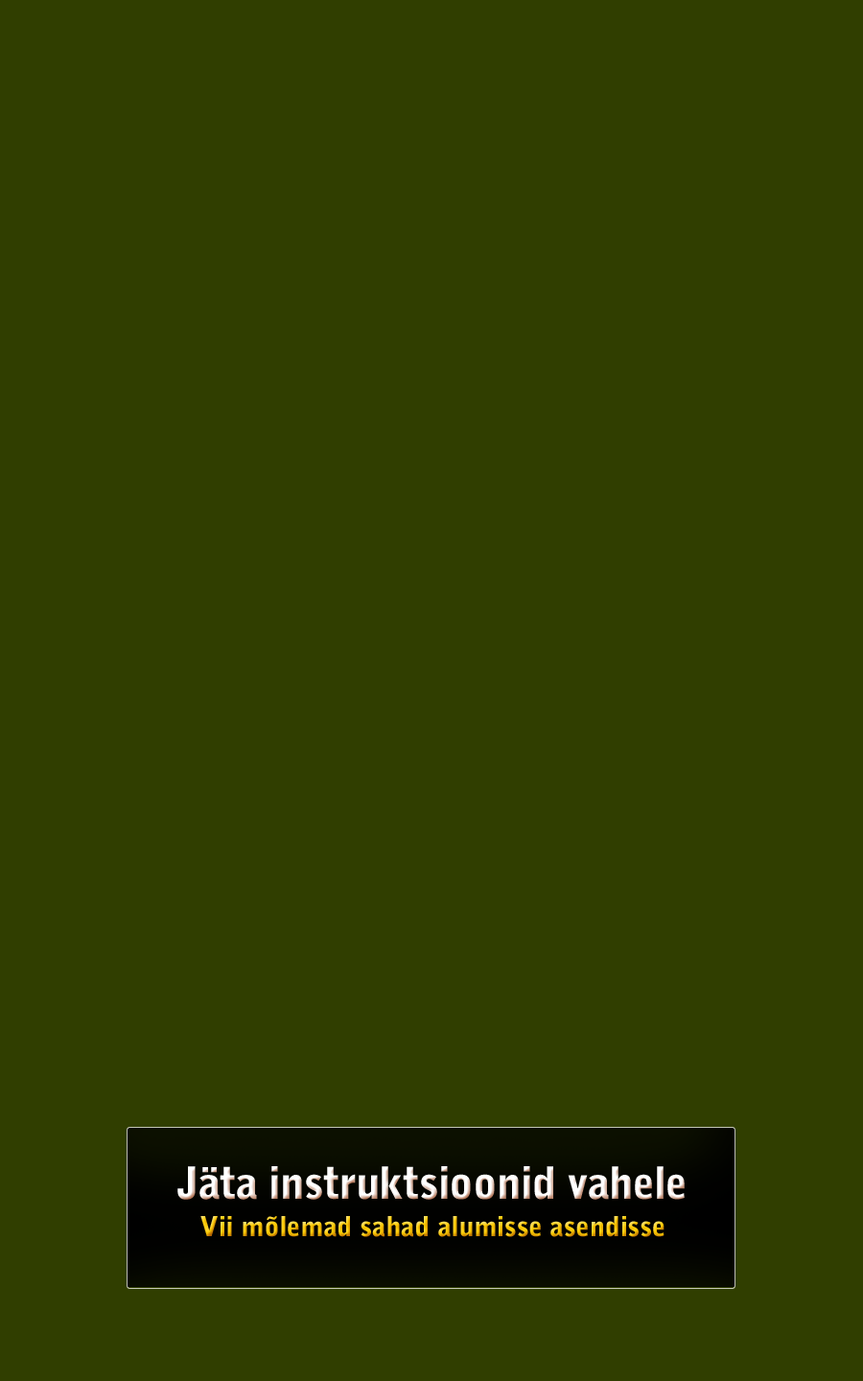
<style>
.page{position:relative;width:863px;height:1381px;background:#303e00}
.page>*{position:absolute;margin:0}
.t1{font:44.2px "BellGothicStd-Black";letter-spacing:-0.02em;color:#ffffff}
.t2{font:27.4px "BellGothicStd-Black"}
</style>
<div class="page">
<p class="t1" style="left:177px;top:1166px;width:508px;height:34px">Jäta instruktsioonid vahele</p>
<p class="t2" style="left:200px;top:1216px;width:465px;height:21px">Vii mõlemad sahad alumisse asendisse</p>
</div>
